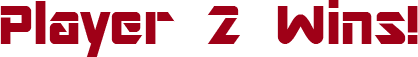
<style>
.page{position:relative;width:418px;height:57px;background:#ffffff}
.page>*{position:absolute;margin:0}
.t1{font:60px "ARDESTINE";color:#9f0017}
</style>
<div class="page">
<p class="t1" style="left:0px;top:0px;width:418px;height:57px">Player 2 Wins!</p>
</div>
